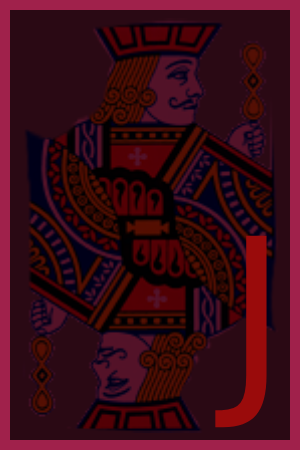
<style>
.page{position:relative;width:300px;height:450px;background:#2a0914}
.page>*{position:absolute;margin:0}
.t1{font:206px "DejaVuSans";color:#9a0b0b}
</style>
<div class="page">
<p class="t1" style="left:215px;top:235px;width:52px;height:193px">J</p>
</div>
